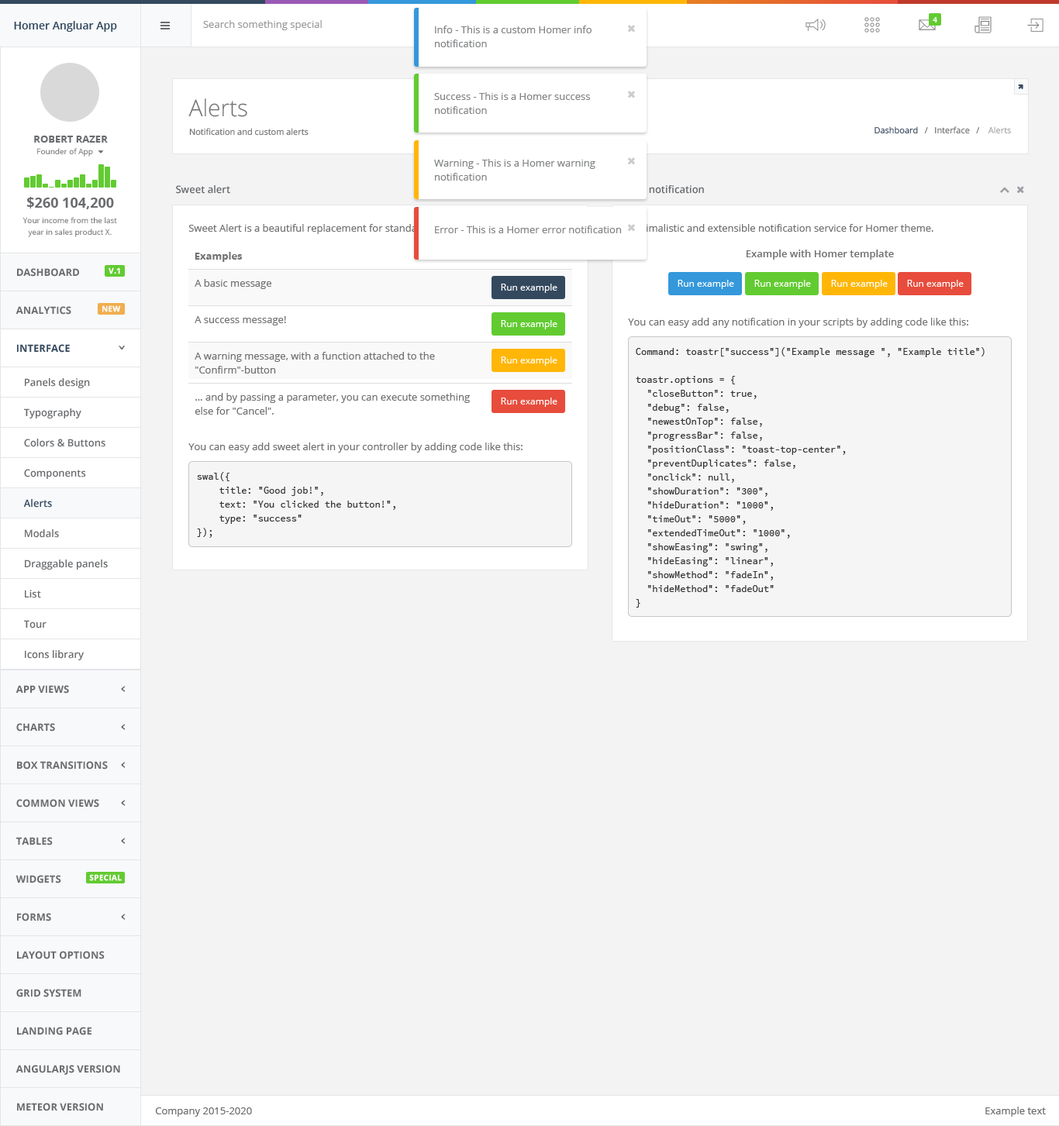
<style>
.page{position:relative;width:1059px;height:1126px;background:#f3f3f4}
.page>*{position:absolute;margin:0}
.t1{font:7.8px "OpenSans-Bold";color:#ffffff}
.t2{font:10.9px "OpenSans-Semibold";color:#34495e}
.t3{font:10.1px "OpenSans";color:#9c9999}
.t4{font:10.1px/14px "OpenSans";color:#838587}
.t5{font:23.3px "OpenSans-Light";color:#727173}
.t6{font:10.1px "OpenSans-Bold";color:#6a6c6f}
.t7{font:8.5px "OpenSans";color:#727173}
.t8{font:8.5px "OpenSans";color:#3c4d60}
.t9{font:8.5px "OpenSans";color:#a5a6a9}
.t10{font:7.8px "OpenSans";color:#6a6c6f}
.t11{font:10.1px "OpenSans-Semibold";color:#676a6c}
.t12{font:14px "OpenSans-Bold";color:#6a6c6f}
.t13{font:7.8px/11.6px "OpenSans";color:#6a6c6f}
.t14{font:10.1px "OpenSans";color:#727173}
.t15{font:10.1px "OpenSans";color:#838587}
.t16{font:10.1px "OpenSans-Bold";color:#727173}
.t17{font:10.1px "OpenSans-Semibold";color:#727173}
.t18{font:7.8px "OpenSans-Bold";color:#ffffff;font-weight:bold}
.t19{font:9.3px "OpenSans";color:#ffffff}
.t20{font:10.1px "OpenSans-Bold";color:#34495e}
.t21{font:10.1px/14px "OpenSans";color:#727173}
.t22{font:10.1px/14px "SourceCodePro-Regular";color:#333333;scale:0.92 1}
.t23{font:10.1px "OpenSans-Semibold";color:#6a6c6f}
.t24{font:10.1px "OpenSans-Semibold";color:#34495e}
.t25{font:10.1px "OpenSans";color:#6a6c6f}
</style>
<div class="page">
<p class="t1" style="left:932px;top:17px;width:5px;height:5px">4</p>
<p class="t2" style="left:14px;top:21px;width:103px;height:11px">Homer Angluar App</p>
<p class="t3" style="left:203px;top:20px;width:119px;height:10px">Search something special</p>
<p class="t4" style="left:435px;top:26px;width:156px;height:21px">Info - This is a custom Homer info notification</p>
<p class="t5" style="left:188px;top:98px;width:59px;height:19px">Alerts</p>
<p class="t4" style="left:434px;top:92px;width:156px;height:22px">Success - This is a Homer success notification</p>
<p class="t6" style="left:34px;top:136px;width:74px;height:7px">ROBERT RAZER</p>
<p class="t7" style="left:189px;top:128px;width:119px;height:8px">Notification and custom alerts</p>
<p class="t7" style="left:874px;top:126px;width:137px;height:8px"><span class="t8">Dashboard</span>   /   Interface   /    <span class="t9">Alerts</span></p>
<p class="t10" style="left:37px;top:148px;width:56px;height:9px">Founder of App</p>
<p class="t4" style="left:434px;top:159px;width:161px;height:22px">Warning - This is a Homer warning notification</p>
<p class="t11" style="left:176px;top:185px;width:54px;height:9px">Sweet alert</p>
<p class="t11" style="left:615px;top:185px;width:89px;height:9px">Toastr notification</p>
<p class="t12" style="left:27px;top:197px;width:87px;height:12px">$260 104,200</p>
<p class="t13" style="left:22px;top:217px;width:95px;height:20px;text-align:center">Your income from the last<br>year in sales product X.</p>
<p class="t14" style="left:188px;top:224px;width:329px;height:10px">Sweet Alert is a beautiful replacement for standard Javascript's "Alert".</p>
<p class="t15" style="left:435px;top:226px;width:187px;height:7px">Error - This is a Homer error notification</p>
<p class="t14" style="left:629px;top:224px;width:304px;height:8px">Minimalistic and extensible notification service for Homer theme.</p>
<p class="t16" style="left:195px;top:252px;width:48px;height:10px">Examples</p>
<p class="t17" style="left:746px;top:250px;width:148px;height:10px">Example with Homer template</p>
<p class="t6" style="left:17px;top:268px;width:62px;height:9px">DASHBOARD</p>
<p class="t18" style="left:109px;top:267px;width:11px;height:7px">V.1</p>
<p class="t14" style="left:195px;top:279px;width:76px;height:10px">A basic message</p>
<p class="t19" style="left:677px;top:280px;width:57px;height:9px">Run example</p>
<p class="t19" style="left:754px;top:280px;width:57px;height:9px">Run example</p>
<p class="t19" style="left:831px;top:280px;width:56px;height:9px">Run example</p>
<p class="t19" style="left:907px;top:280px;width:56px;height:9px">Run example</p>
<p class="t19" style="left:501px;top:284px;width:56px;height:9px">Run example</p>
<p class="t18" style="left:102px;top:305px;width:19px;height:7px">NEW</p>
<p class="t6" style="left:16px;top:306px;width:55px;height:9px">ANALYTICS</p>
<p class="t14" style="left:195px;top:316px;width:91px;height:10px">A success message!</p>
<p class="t14" style="left:628px;top:318px;width:340px;height:10px">You can easy add any notification in your scripts by adding code like this:</p>
<p class="t19" style="left:501px;top:320px;width:56px;height:9px">Run example</p>
<p class="t20" style="left:17px;top:344px;width:53px;height:9px">INTERFACE</p>
<p class="t21" style="left:195px;top:352px;width:240px;height:22px">A warning message, with a function attached to the "Confirm"-button</p>
<p class="t22" style="left:636px;top:347px;width:348px;height:261px">Command: toastr["success"]("Example message ", "Example title")<br><br>toastr.options = {<br>  "closeButton": true,<br>  "debug": false,<br>  "newestOnTop": false,<br>  "progressBar": false,<br>  "positionClass": "toast-top-center",<br>  "preventDuplicates": false,<br>  "onclick": null,<br>  "showDuration": "300",<br>  "hideDuration": "1000",<br>  "timeOut": "5000",<br>  "extendedTimeOut": "1000",<br>  "showEasing": "swing",<br>  "hideEasing": "linear",<br>  "showMethod": "fadeIn",<br>  "hideMethod": "fadeOut"<br>}</p>
<p class="t19" style="left:501px;top:357px;width:56px;height:9px">Run example</p>
<p class="t23" style="left:25px;top:378px;width:65px;height:10px">Panels design</p>
<p class="t21" style="left:195px;top:393px;width:275px;height:22px">... and by passing a parameter, you can execute something else for "Cancel".</p>
<p class="t19" style="left:501px;top:398px;width:56px;height:9px">Run example</p>
<p class="t23" style="left:24px;top:408px;width:57px;height:11px">Typography</p>
<p class="t23" style="left:24px;top:439px;width:81px;height:8px">Colors &amp; Buttons</p>
<p class="t14" style="left:188px;top:443px;width:334px;height:10px">You can easy add sweet alert in your controller by adding code like this:</p>
<p class="t23" style="left:24px;top:469px;width:62px;height:10px">Components</p>
<p class="t22" style="left:197px;top:472px;width:198px;height:66px">swal({<br>    title: "Good job!",<br>    text: "You clicked the button!",<br>    type: "success"<br>});</p>
<p class="t24" style="left:23px;top:499px;width:29px;height:9px">Alerts</p>
<p class="t23" style="left:25px;top:529px;width:34px;height:9px">Modals</p>
<p class="t23" style="left:25px;top:560px;width:83px;height:10px">Draggable panels</p>
<p class="t23" style="left:25px;top:590px;width:16px;height:8px">List</p>
<p class="t23" style="left:24px;top:620px;width:23px;height:9px">Tour</p>
<p class="t23" style="left:25px;top:650px;width:59px;height:10px">Icons library</p>
<p class="t6" style="left:16px;top:685px;width:53px;height:9px">APP VIEWS</p>
<p class="t6" style="left:16px;top:723px;width:39px;height:9px">CHARTS</p>
<p class="t6" style="left:17px;top:761px;width:91px;height:9px">BOX TRANSITIONS</p>
<p class="t6" style="left:16px;top:799px;width:83px;height:9px">COMMON VIEWS</p>
<p class="t6" style="left:16px;top:837px;width:37px;height:9px">TABLES</p>
<p class="t6" style="left:16px;top:875px;width:45px;height:9px">WIDGETS</p>
<p class="t18" style="left:89px;top:874px;width:33px;height:7px">SPECIAL</p>
<p class="t6" style="left:17px;top:913px;width:34px;height:9px">FORMS</p>
<p class="t6" style="left:17px;top:951px;width:88px;height:9px">LAYOUT OPTIONS</p>
<p class="t6" style="left:16px;top:989px;width:65px;height:9px">GRID SYSTEM</p>
<p class="t6" style="left:17px;top:1027px;width:74px;height:9px">LANDING PAGE</p>
<p class="t6" style="left:16px;top:1065px;width:104px;height:10px">ANGULARJS VERSION</p>
<p class="t6" style="left:17px;top:1103px;width:86px;height:8px">METEOR VERSION</p>
<p class="t25" style="left:155px;top:1108px;width:97px;height:9px">Company 2015-2020</p>
<p class="t25" style="left:985px;top:1107px;width:61px;height:10px">Example text</p>
</div>
